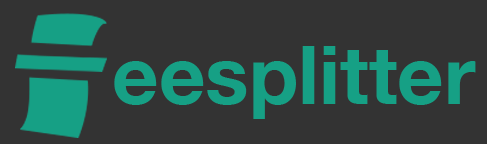
<style>
.page{position:relative;width:487px;height:144px;background:#333333}
.page>*{position:absolute;margin:0}
.t1{font:81px "HelveticaNeue-Bold";color:#16a085}
</style>
<div class="page">
<p class="t1" style="left:114px;top:46px;width:362px;height:73px">eesplitter</p>
</div>
